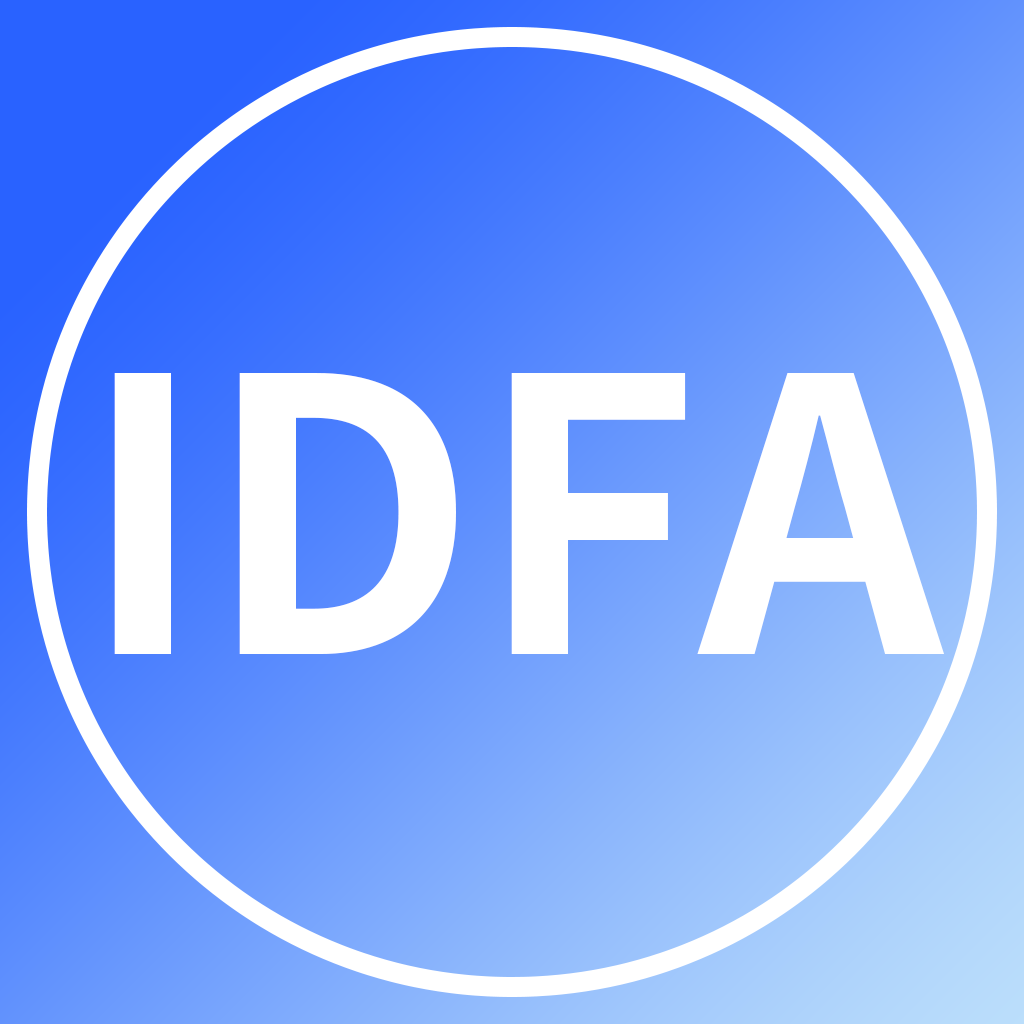
<style>
.page{position:relative;width:1024px;height:1024px}
.page>*{position:absolute;margin:0}
.t1{font:380px "NotoSansCJKjp-Bold";color:#ffffff}
</style>
<div class="page">
<p class="t1" style="left:114px;top:373px;width:830px;height:281px">IDFA</p>
</div>
